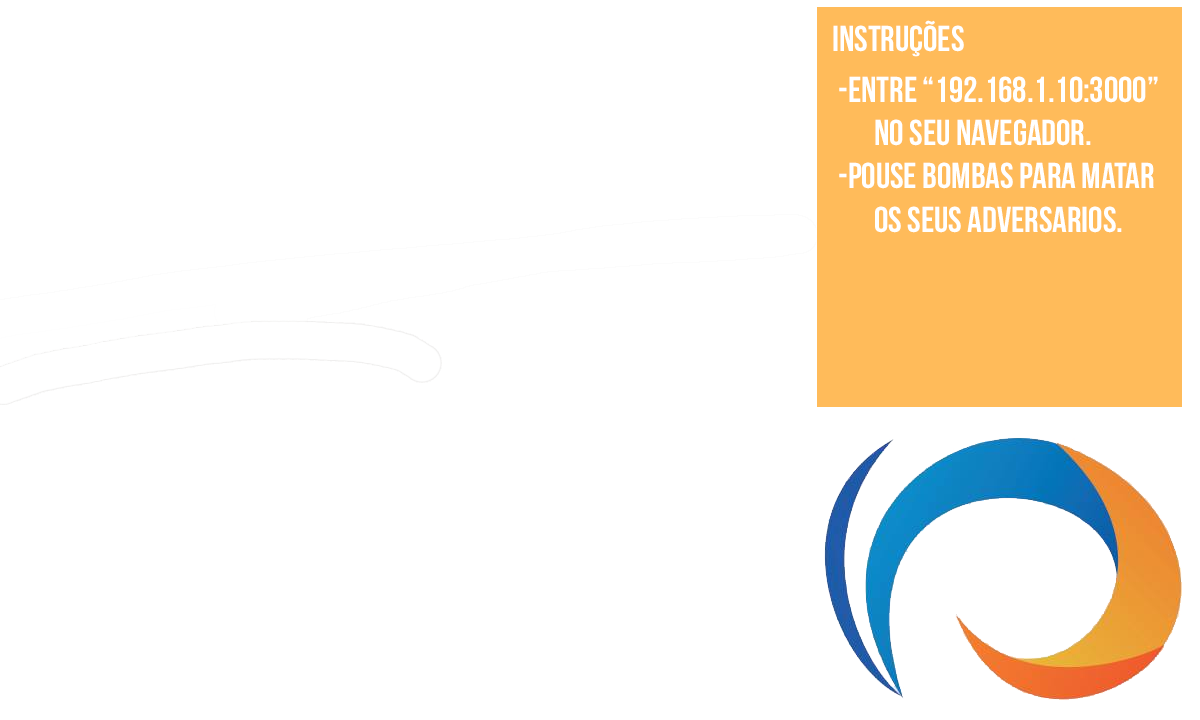
<style>
.page{position:relative;width:1200px;height:720px;background:#ffffff}
.page>*{position:absolute;margin:0}
.t1{font:36px "BebasNeue";color:#ffffff}
</style>
<div class="page">
<p class="t1" style="left:833px;top:20px;width:131px;height:37px">Instruções</p>
<p class="t1" style="left:839px;top:76px;width:319px;height:157px">-Entre “192.168.1.10:3000” <br> no seu navegador.<br>-Pouse bombas para matar<br> os seus adversarios.</p>
</div>
